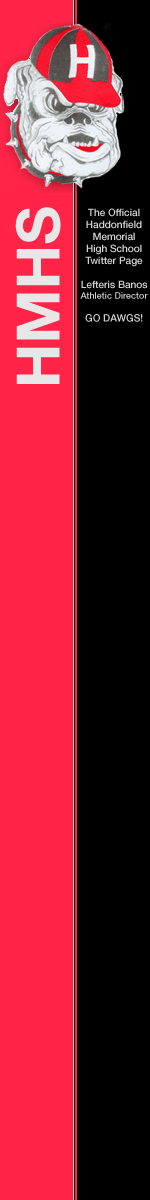
<style>
.page{position:relative;width:150px;height:1200px;background:#000000}
.page>*{position:absolute;margin:0}
.t1{font:60px "HelveticaNeueLTStd-Bd";color:#e8e7e7}
.t2{font:10px "HelveticaNeueLTStd-Md";color:#d2d2d2}
.t3{font:9px "HelveticaNeueLTStd-Md";color:#d2d2d2}
</style>
<div class="page">
<p class="t1" style="left:15px;top:207px;width:46px;height:177px;rotate:-90deg">HMHS</p>
<p class="t2" style="left:80px;top:208px;width:68px;height:114px;text-align:center">The Official<br>Haddonfield<br>Memorial<br>High School<br>Twitter Page<br><br>Lefteris Banos<br><span class="t3">Athletic Director<br><br></span>GO DAWGS!</p>
</div>
